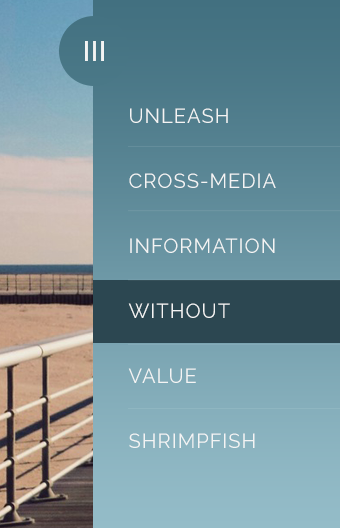
<style>
.page{position:relative;width:340px;height:528px}
.page>*{position:absolute;margin:0}
.t1{font:20px/65px "Raleway";letter-spacing:0.05em;color:#f4f4f4;text-transform:uppercase}
</style>
<div class="page">
<p class="t1" style="left:128px;top:108px;width:148px;height:340px">unleash<br>cross-media <br>information <br>without <br>value<br>shrimpfish</p>
</div>
